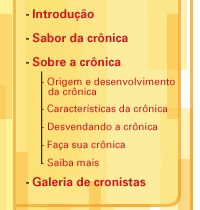
<style>
.page{position:relative;width:200px;height:210px;background:#fce687}
.page>*{position:absolute;margin:0}
.t1{font:12px/13px "Univers-Bold";color:#ce181e}
.t2{font:10px/10px "Univers";color:#ce181e}
.t3{font:10px "Univers";color:#ce181e}
</style>
<div class="page">
<p class="t1" style="left:32px;top:9px;width:114px;height:178px">Introdução<br><br>  Sabor da crônica<br><br>  Sobre a crônica<br><br><br><br><br><br><br><br><br><br>  Galeria de cronistas</p>
<p class="t2" style="left:41px;top:77px;width:134px;height:90px">- Origem e desenvolvimento<br><br><br>- Características da crônica <br><br>- Desvendando a crônica <br><br>- Faça sua crônica<br><br>- Saiba mais</p>
<p class="t3" style="left:48px;top:87px;width:48px;height:9px">da crônica</p>
</div>
